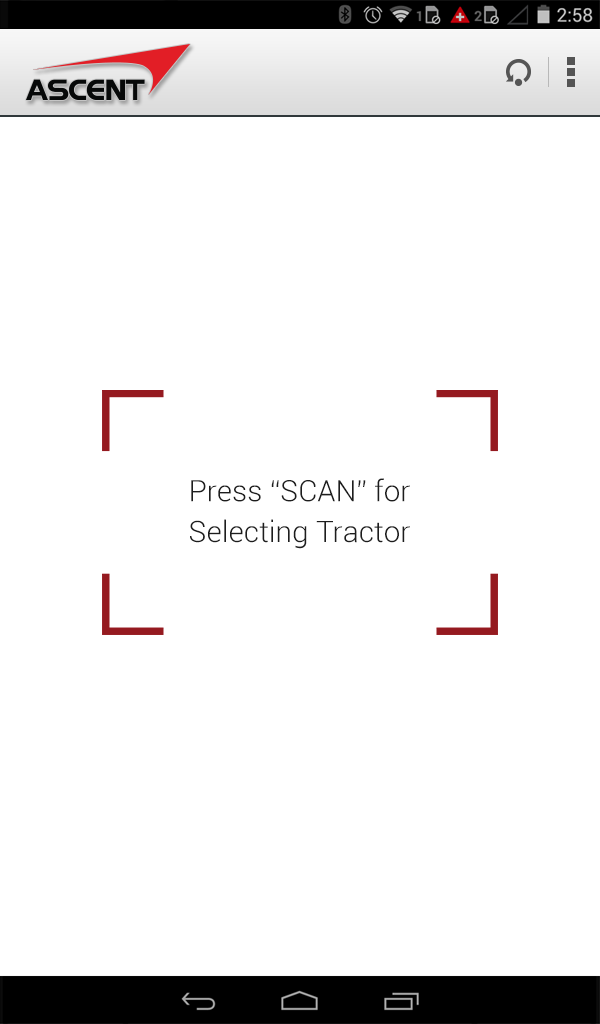
<style>
.page{position:relative;width:600px;height:1024px;background:#ffffff}
.page>*{position:absolute;margin:0}
.t1{font:29.6px/40.7px "Roboto-Light";color:#1d1d1d}
</style>
<div class="page">
<p class="t1" style="left:190px;top:478px;width:220px;height:71px;text-align:center">Press “SCAN” for<br>Selecting Tractor</p>
</div>
